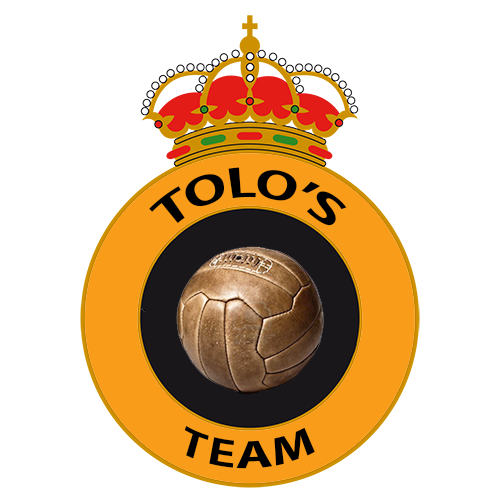
<style>
.page{position:relative;width:500px;height:500px;background:#ffffff}
.page>*{position:absolute;margin:0}
.t1{font:45px "MyriadPro-Bold";color:#000000}
.t2{font:36.6px "MyriadPro-Bold";color:#000000;scale:1.41 1}
</style>
<div class="page">
<p class="t1" style="left:149px;top:167px;width:198px;height:59px">TOLO’S</p>
<p class="t2" style="left:184px;top:426px;width:131px;height:43px">TEAM</p>
</div>
